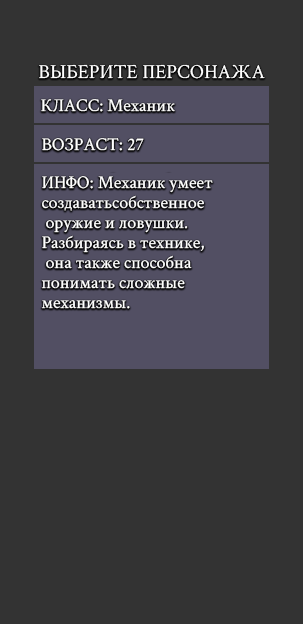
<style>
.page{position:relative;width:303px;height:624px;background:#333333}
.page>*{position:absolute;margin:0}
.t1{font:20px "CrimsonText-Regular";color:#ffffff}
.t2{font:18px "CrimsonText-Regular";color:#ffffff}
.t3{font:18px/20px "CrimsonText-Regular";color:#ffffff}
</style>
<div class="page">
<p class="t1" style="left:39px;top:64px;width:226px;height:15px">ВЫБЕРИТЕ ПЕРСОНАЖА</p>
<p class="t2" style="left:41px;top:99px;width:134px;height:13px">КЛАСС: Механик</p>
<p class="t2" style="left:42px;top:138px;width:102px;height:13px">ВОЗРАСТ: 27</p>
<p class="t3" style="left:41px;top:176px;width:172px;height:133px">ИНФО: Механик умеет<br>создаватьсобственное<br> оружие и ловушки.<br>Разбираясь в технике,<br> она также способна<br>понимать сложные<br>механизмы.</p>
</div>
